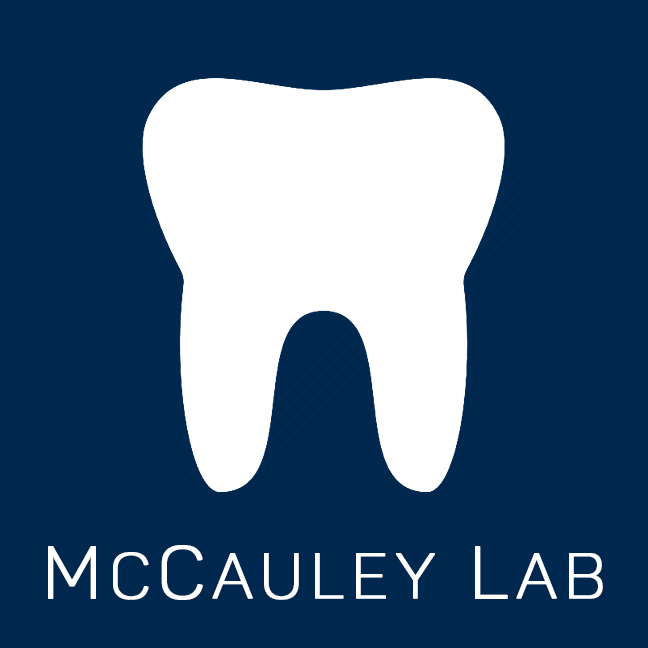
<style>
.page{position:relative;width:648px;height:648px;background:#00274d}
.page>*{position:absolute;margin:0}
.t1{font:63px "Panton-LightCaps";letter-spacing:0.1em;color:#ffffff;font-weight:bold}
.t2{font:73px "Panton-LightCaps";letter-spacing:0.1em;color:#ffffff;font-weight:bold}
</style>
<div class="page">
<p class="t1" style="left:48px;top:545px;width:555px;height:55px"><span class="t2">M</span>c<span class="t2">C</span>auley<span class="t2"> L</span>ab</p>
</div>
